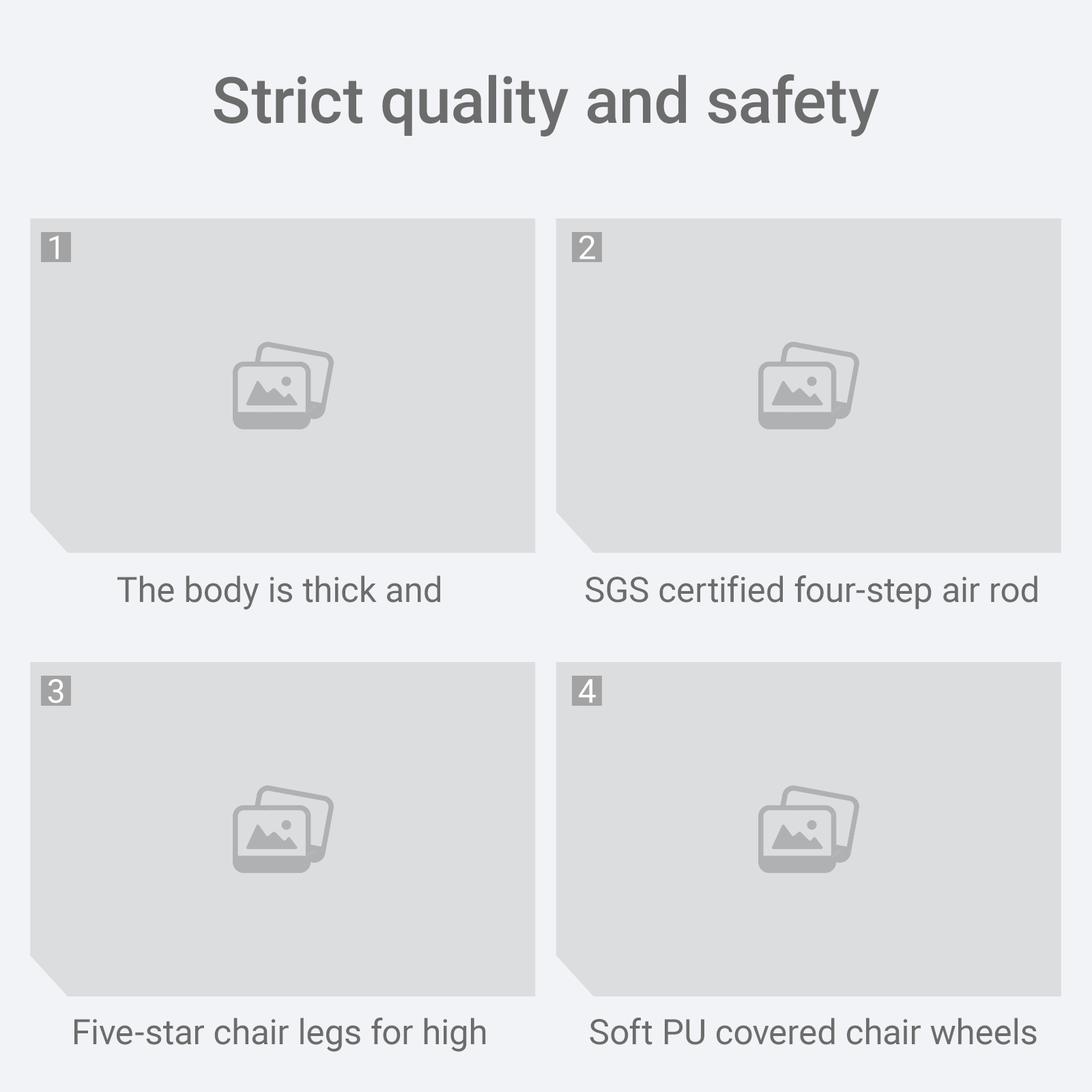
<style>
.page{position:relative;width:1092px;height:1092px;background:#dcdddf}
.page>*{position:absolute;margin:0}
.t1{font:64.1px "Roboto-Medium";color:#6c6c6c}
.t2{font:32.8px "Roboto-Regular";color:#ffffff}
.t3{font:34.9px "Roboto-Regular";color:#6c6c6c}
</style>
<div class="page">
<p class="t1" style="left:214px;top:74px;width:665px;height:62px">Strict quality and safety</p>
<p class="t2" style="left:49px;top:235px;width:10px;height:24px">1</p>
<p class="t2" style="left:579px;top:235px;width:16px;height:24px">2</p>
<p class="t3" style="left:117px;top:575px;width:323px;height:34px">The body is thick and</p>
<p class="t3" style="left:586px;top:575px;width:451px;height:34px">SGS certified four-step air rod</p>
<p class="t2" style="left:48px;top:679px;width:15px;height:24px">3</p>
<p class="t2" style="left:579px;top:679px;width:17px;height:24px">4</p>
<p class="t3" style="left:74px;top:1018px;width:412px;height:34px">Five-star chair legs for high</p>
<p class="t3" style="left:590px;top:1018px;width:447px;height:27px">Soft PU covered chair wheels</p>
</div>
